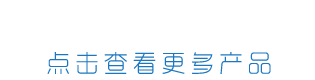
<style>
.page{position:relative;width:315px;height:80px;background:#ffffff}
.page>*{position:absolute;margin:0}
.t1{font:24px "MFYueHei_Noncommercial-Light";letter-spacing:0.2em;color:#1b77c0;text-transform:uppercase}
</style>
<div class="page">
<p class="t1" style="left:47px;top:52px;width:224px;height:22px">点击查看更多产品</p>
</div>
